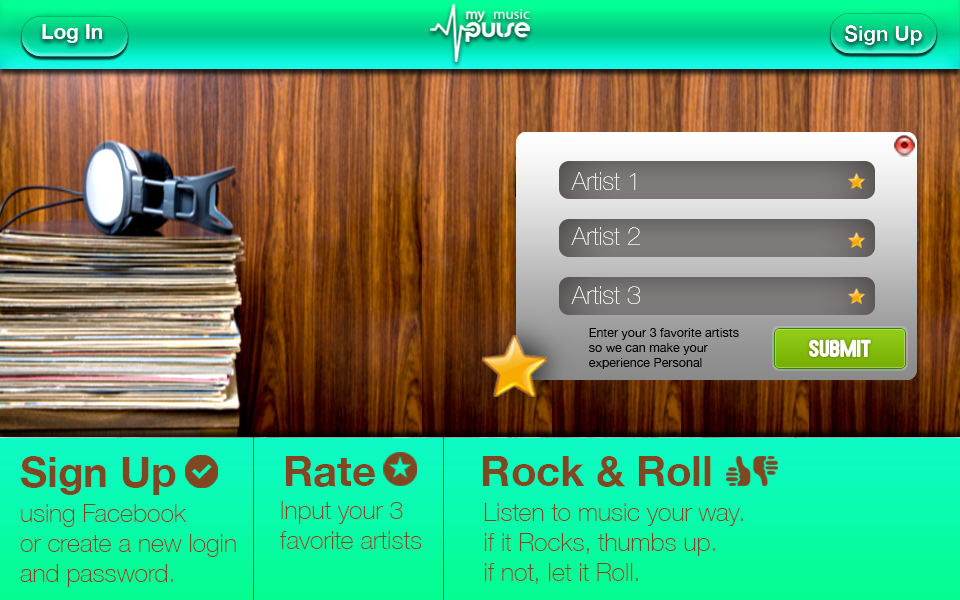
<style>
.page{position:relative;width:960px;height:600px}
.page>*{position:absolute;margin:0}
.t1{font:25px "HelveticaNeue-UltraLight";color:#ffffff}
.t2{font:12.5px "HelveticaNeue";color:#000000}
.t3{font:41.7px "HelveticaNeue-Bold";color:#7f4722}
.t4{font:25px "HelveticaNeue-Thin";color:#7f4722}
</style>
<div class="page">
<p class="t1" style="left:571px;top:172px;width:65px;height:18px">Artist 1</p>
<p class="t1" style="left:571px;top:227px;width:69px;height:18px">Artist 2</p>
<p class="t1" style="left:571px;top:286px;width:69px;height:18px">Artist 3</p>
<p class="t2" style="left:589px;top:328px;width:150px;height:41px">Enter your 3 favorite artists <br>so we can make your <br>experience Personal</p>
<p class="t3" style="left:21px;top:456px;width:155px;height:39px">Sign Up</p>
<p class="t3" style="left:285px;top:456px;width:90px;height:31px">Rate</p>
<p class="t3" style="left:482px;top:456px;width:229px;height:31px">Rock &amp; Roll</p>
<p class="t4" style="left:20px;top:504px;width:216px;height:83px">using Facebook<br>or create a new login <br>and password.</p>
<p class="t4" style="left:279px;top:501px;width:143px;height:48px">Input your 3 <br>favorite artists</p>
<p class="t4" style="left:484px;top:503px;width:259px;height:81px">Listen to music your way.<br>if it Rocks, thumbs up.<br>if not, let it Roll.</p>
</div>
